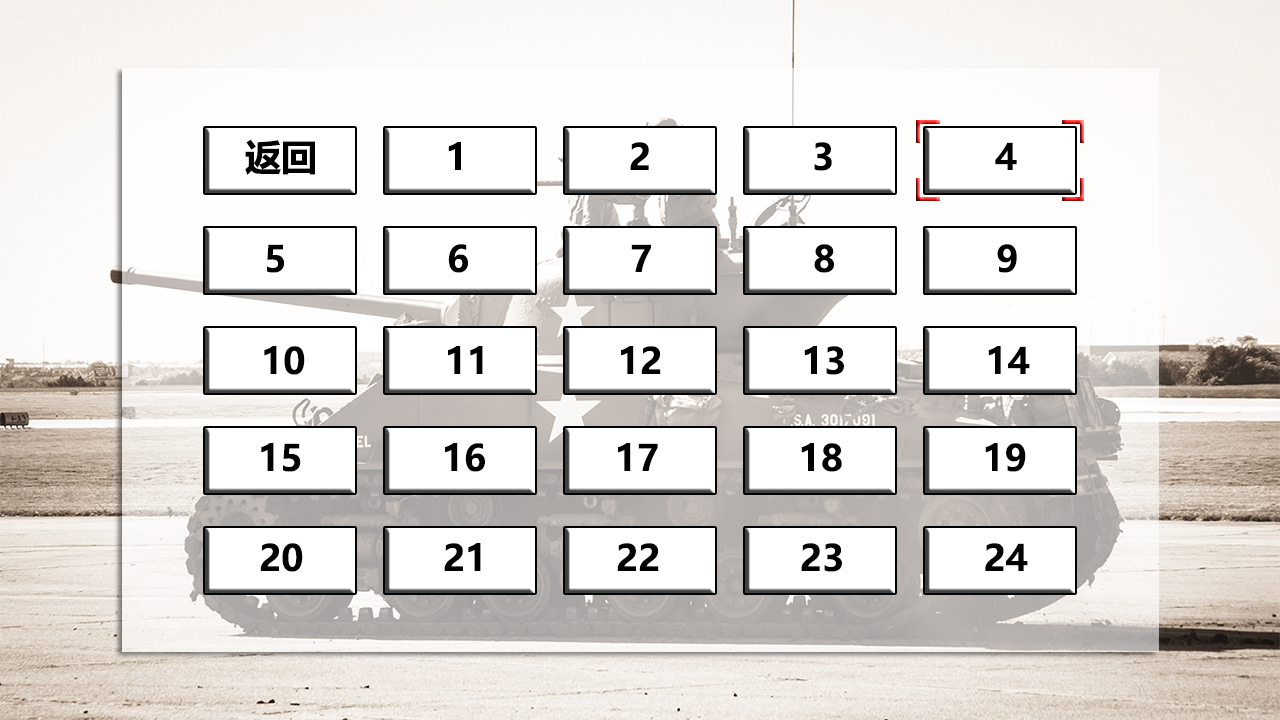
<style>
.page{position:relative;width:1280px;height:720px;background:#ffffff}
.page>*{position:absolute;margin:0}
.t1{font:36px "MicrosoftYaHei-Bold";color:#000000}
</style>
<div class="page">
<p class="t1" style="left:245px;top:139px;width:772px;height:36px">返回            1               2               3               4</p>
<p class="t1" style="left:267px;top:244px;width:750px;height:29px">5               6               7               8               9</p>
<p class="t1" style="left:264px;top:346px;width:766px;height:29px">10             11            12             13             14</p>
<p class="t1" style="left:261px;top:443px;width:765px;height:29px">15             16            17             18             19</p>
<p class="t1" style="left:260px;top:543px;width:768px;height:29px">20             21            22             23             24</p>
</div>
